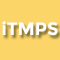
<style>
.page{position:relative;width:60px;height:60px;background:#fbd568}
.page>*{position:absolute;margin:0}
.t1{font:18px "Montserrat-Bold";color:#ffffff}
</style>
<div class="page">
<p class="t1" style="left:2px;top:21px;width:56px;height:15px">iTMPS</p>
</div>
